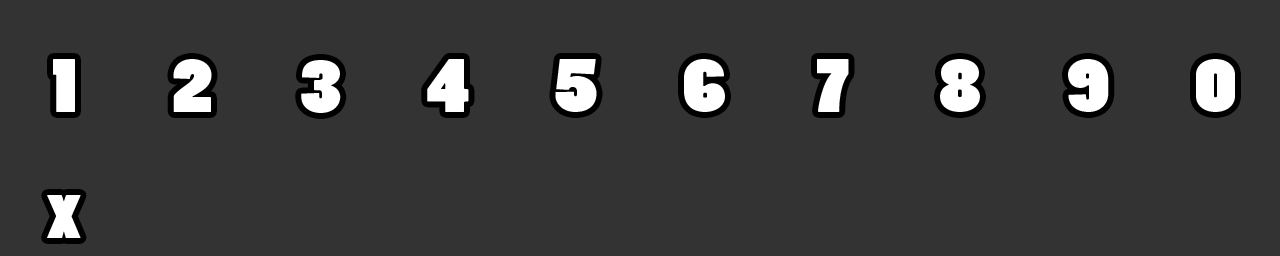
<style>
.page{position:relative;width:1280px;height:256px;background:#333333}
.page>*{position:absolute;margin:0}
.t1{font:72px "PoplarStd";color:#ffffff;scale:1.3 1}
</style>
<div class="page">
<p class="t1" style="left:53px;top:59px;width:22px;height:53px">1</p>
<p class="t1" style="left:173px;top:59px;width:39px;height:53px">2</p>
<p class="t1" style="left:301px;top:60px;width:40px;height:53px">3</p>
<p class="t1" style="left:427px;top:59px;width:42px;height:53px">4</p>
<p class="t1" style="left:555px;top:59px;width:42px;height:53px">5</p>
<p class="t1" style="left:684px;top:59px;width:41px;height:53px">6</p>
<p class="t1" style="left:817px;top:59px;width:32px;height:53px">7</p>
<p class="t1" style="left:940px;top:59px;width:40px;height:53px">8</p>
<p class="t1" style="left:1068px;top:59px;width:41px;height:53px">9</p>
<p class="t1" style="left:1196px;top:59px;width:39px;height:53px">0</p>
<p class="t1" style="left:47px;top:195px;width:34px;height:43px">x</p>
</div>
